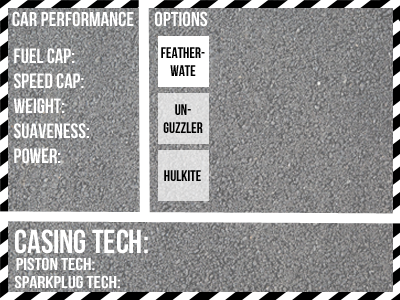
<style>
.page{position:relative;width:400px;height:300px}
.page>*{position:absolute;margin:0}
.t1{font:20.1px "BebasNeue";color:#ffffff;scale:1.06 1}
.t2{font:20.8px "BebasNeue";color:#ffffff}
.t3{font:15px "BebasNeue";color:#000000}
.t4{font:33.2px "BebasNeue";color:#ffffff}
.t5{font:17.2px "BebasNeue";color:#ffffff;scale:1.16 1}
</style>
<div class="page">
<p class="t1" style="left:12px;top:11px;width:122px;height:16px">car performance</p>
<p class="t1" style="left:155px;top:11px;width:53px;height:16px">options</p>
<p class="t2" style="left:13px;top:48px;width:76px;height:116px">Fuel Cap:<br>Speed Cap:<br>Weight:<br>SuaveNess:<br>Power:</p>
<p class="t3" style="left:161px;top:47px;width:44px;height:29px;text-align:center">Feather-<br>wate</p>
<p class="t3" style="left:163px;top:104px;width:40px;height:29px;text-align:center">Un-<br>guzzler</p>
<p class="t3" style="left:164px;top:170px;width:37px;height:11px">Hulkite</p>
<p class="t4" style="left:15px;top:229px;width:133px;height:25px">Casing Tech:</p>
<p class="t5" style="left:16px;top:257px;width:79px;height:14px">Piston Tech:</p>
<p class="t5" style="left:14px;top:275px;width:106px;height:14px">Sparkplug Tech:</p>
</div>
